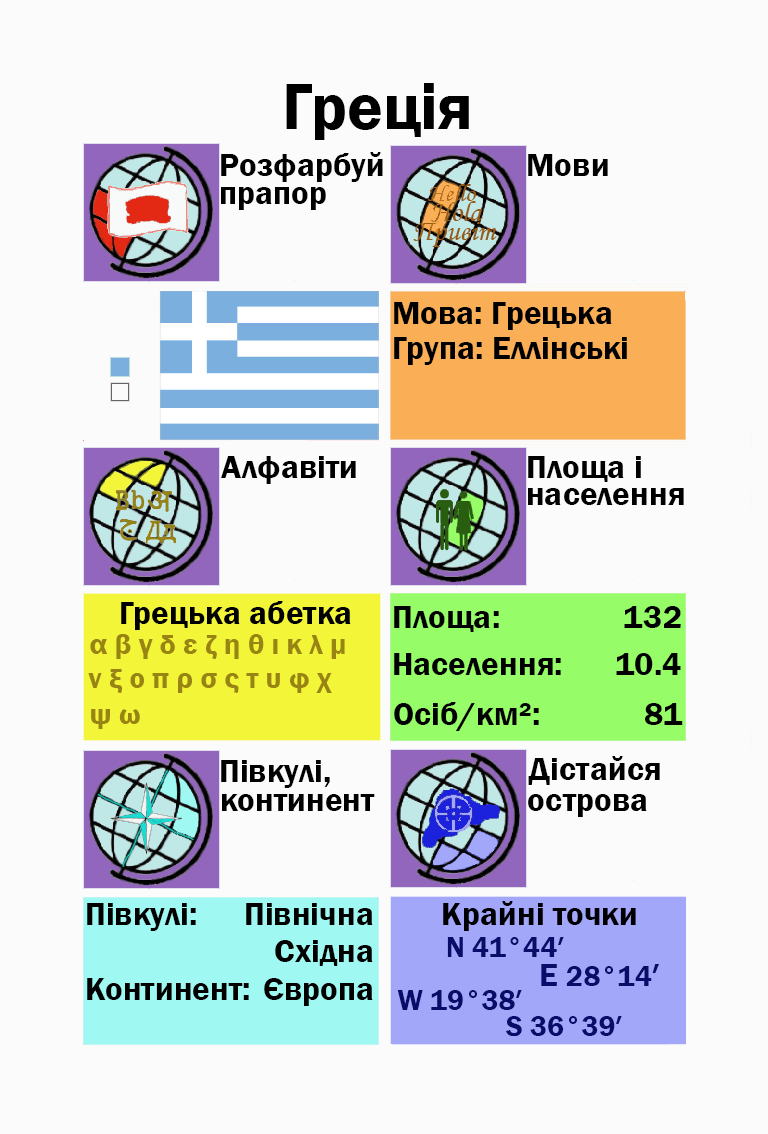
<style>
.page{position:relative;width:768px;height:1134px;background:#fbfbfb}
.page>*{position:absolute;margin:0}
.t1{font:66.7px "FranklinGothic-Demi";color:#000000}
.t2{font:33.3px "FranklinGothic-Demi";color:#000000}
.t3{font:33.3px "FranklinGothic-Demi";color:#000003}
.t4{font:29.2px "FranklinGothic-Demi";color:#988413}
.t5{font:29.2px "FranklinGothic-Demi";color:#090c69}
.t6{font:33.3px "FranklinGothic-Demi";color:#090c69}
</style>
<div class="page">
<p class="t1" style="left:286px;top:83px;width:183px;height:57px">Греція</p>
<p class="t2" style="left:221px;top:152px;width:162px;height:30px">Розфарбуй</p>
<p class="t2" style="left:528px;top:154px;width:80px;height:22px">Мови</p>
<p class="t2" style="left:221px;top:187px;width:105px;height:23px">прапор</p>
<p class="t2" style="left:394px;top:302px;width:218px;height:28px">Мова: Грецька</p>
<p class="t2" style="left:394px;top:337px;width:233px;height:28px">Група: Еллінські</p>
<p class="t2" style="left:221px;top:456px;width:135px;height:28px">Алфавіти</p>
<p class="t2" style="left:528px;top:456px;width:113px;height:26px">Площа і</p>
<p class="t2" style="left:528px;top:488px;width:156px;height:17px">населення</p>
<p class="t2" style="left:121px;top:601px;width:230px;height:29px">Грецька абетка</p>
<p class="t2" style="left:394px;top:606px;width:105px;height:26px">Площа:</p>
<p class="t3" style="left:624px;top:606px;width:57px;height:22px">132</p>
<p class="t4" style="left:90px;top:634px;width:255px;height:25px">α β γ δ ε ζ η θ ι κ λ μ</p>
<p class="t2" style="left:394px;top:653px;width:167px;height:22px">Населення:</p>
<p class="t2" style="left:616px;top:653px;width:65px;height:22px">10.4</p>
<p class="t4" style="left:88px;top:669px;width:244px;height:24px">ν ξ ο π ρ σ ς τ υ φ χ</p>
<p class="t2" style="left:394px;top:702px;width:145px;height:29px">Осіб/км²:</p>
<p class="t4" style="left:91px;top:709px;width:49px;height:20px">ψ ω</p>
<p class="t2" style="left:645px;top:703px;width:38px;height:22px">81</p>
<p class="t2" style="left:221px;top:760px;width:109px;height:28px">Півкулі,</p>
<p class="t2" style="left:528px;top:756px;width:132px;height:29px">Дістайся</p>
<p class="t2" style="left:222px;top:794px;width:153px;height:17px">континент</p>
<p class="t2" style="left:528px;top:794px;width:119px;height:23px">острова</p>
<p class="t2" style="left:87px;top:903px;width:109px;height:28px">Півкулі:</p>
<p class="t2" style="left:246px;top:903px;width:127px;height:22px">Північна</p>
<p class="t3" style="left:443px;top:901px;width:193px;height:30px">Крайні точки</p>
<p class="t2" style="left:275px;top:940px;width:98px;height:26px">Східна</p>
<p class="t5" style="left:447px;top:937px;width:117px;height:20px">N 41°44′</p>
<p class="t5" style="left:541px;top:964px;width:118px;height:22px"><span class="t6">E </span>28°14<span class="t6">′</span></p>
<p class="t2" style="left:87px;top:978px;width:162px;height:22px">Континент:</p>
<p class="t2" style="left:264px;top:978px;width:109px;height:28px">Європа</p>
<p class="t5" style="left:397px;top:990px;width:125px;height:20px">W 19°38′</p>
<p class="t5" style="left:506px;top:1016px;width:116px;height:21px">S 36°39′</p>
</div>
